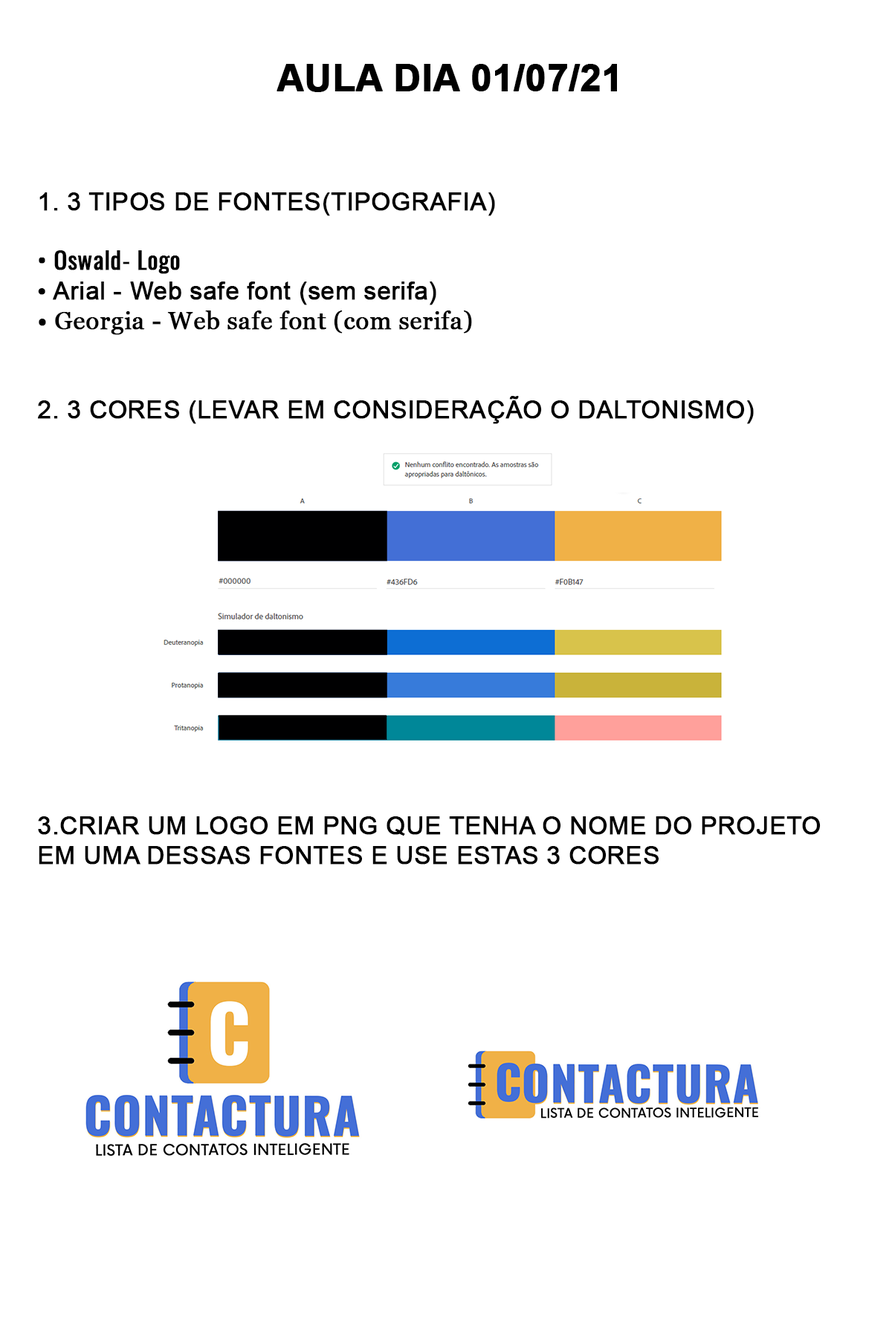
<style>
.page{position:relative;width:892px;height:1337px;background:#ffffff}
.page>*{position:absolute;margin:0}
.t1{font:37.2px "Arial-BoldMT";color:#000000;text-transform:uppercase;font-weight:bold}
.t2{font:24.8px "ArialMT";color:#000000;text-transform:uppercase;font-weight:bold}
.t3{font:24.8px "Oswald-Regular";color:#000000;font-weight:bold}
.t4{font:24.8px "ArialMT";color:#000000;font-weight:bold}
.t5{font:24.8px "Georgia";color:#000000;font-weight:bold}
</style>
<div class="page">
<p class="t1" style="left:276px;top:64px;width:341px;height:28px">aula dia 01/07/21</p>
<p class="t2" style="left:38px;top:192px;width:782px;height:673px">1. 3 tipos de fontes(tipografia)<br><br><span class="t3">• Oswald- Logo<br></span><span class="t4">• Arial - Web safe font (sem serifa)<br></span><span class="t5">• Georgia - Web safe font (com serifa)<br></span><br><br>2. 3 cores (levar em consideração o daltonismo)<br><br><br><br><br><br><br><br><br><br><br><br><br><br>3.criar um logo em png que tenha o nome do projeto<br>em uma dessas fontes e use estas 3 cores</p>
</div>
